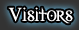
<style>
.page{position:relative;width:79px;height:30px}
.page>*{position:absolute;margin:0}
.t1{font:17px "Morpheus";color:#ffffff;scale:1.1 1}
</style>
<div class="page">
<p class="t1" style="left:8px;top:7px;width:65px;height:17px">Visitors</p>
</div>
